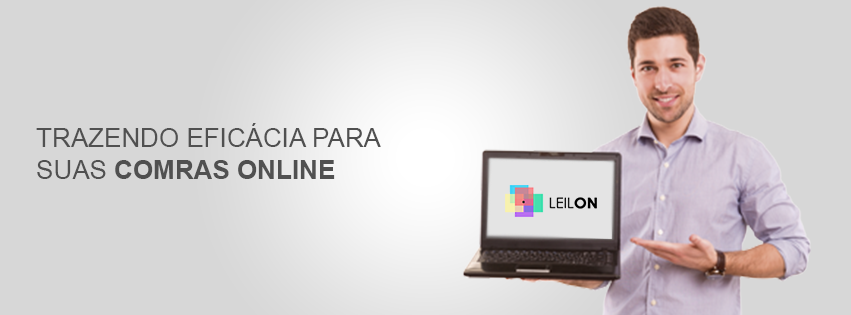
<style>
.page{position:relative;width:851px;height:315px;background:#d7d7d7}
.page>*{position:absolute;margin:0}
.t1{font:26px "ArialMT";color:#505050}
.t2{font:26px "Arial-BoldMT";color:#505050}
</style>
<div class="page">
<p class="t1" style="left:36px;top:123px;width:345px;height:56px">TRAZENDO EFICÁCIA PARA <br>SUAS <span class="t2">COMRAS ONLINE</span></p>
</div>
